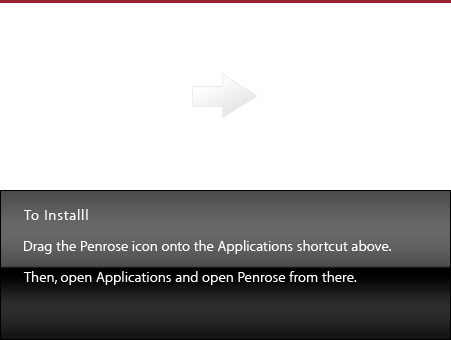
<style>
.page{position:relative;width:451px;height:340px;background:#ffffff}
.page>*{position:absolute;margin:0}
.t1{font:15px "MyriadApple-Text";letter-spacing:0.05em;color:#ffffff}
.t2{font:15px "MyriadApple-Text";color:#ffffff}
</style>
<div class="page">
<p class="t1" style="left:23px;top:209px;width:65px;height:11px">To Installl</p>
<p class="t2" style="left:24px;top:240px;width:367px;height:14px">Drag the Penrose icon onto the Applications shortcut above.</p>
<p class="t2" style="left:23px;top:271px;width:334px;height:14px">Then, open Applications and open Penrose from there.</p>
</div>
